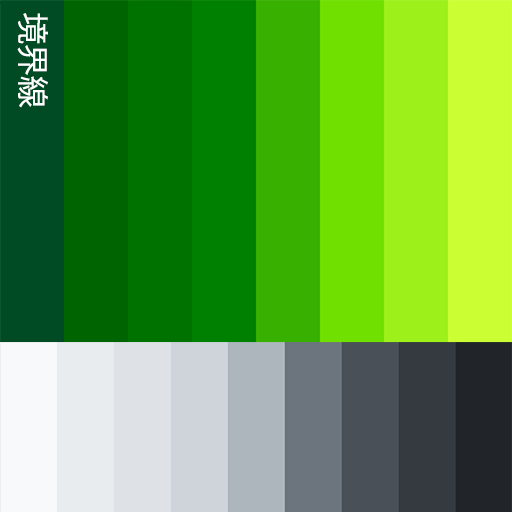
<style>
.page{position:relative;width:512px;height:512px}
.page>*{position:absolute;margin:0}
.t1{font:32px "KozGoPr6N-Regular";color:#ffffff}
</style>
<div class="page">
<p class="t1" style="left:17px;top:13px;width:31px;height:95px;rotate:90deg">境界線</p>
</div>
